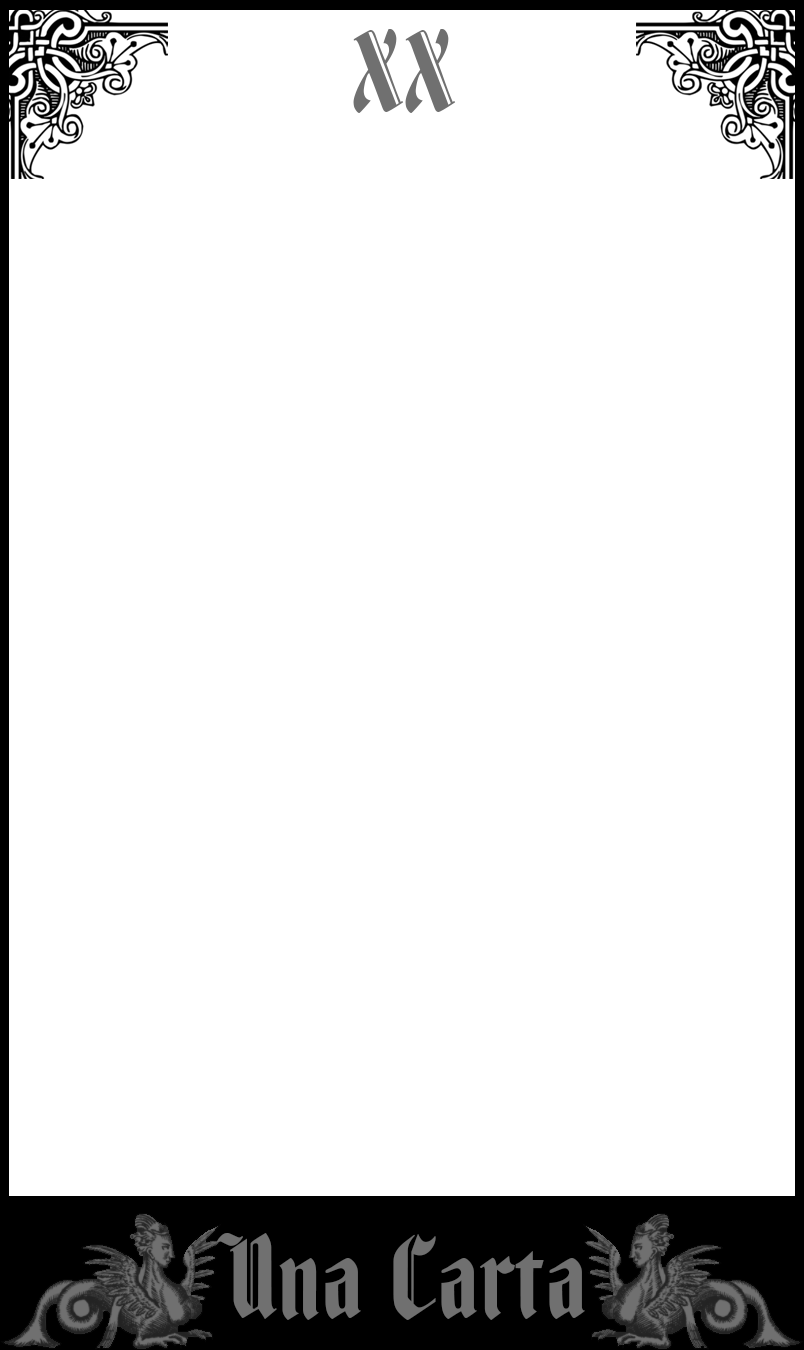
<style>
.page{position:relative;width:804px;height:1350px;background:#ffffff}
.page>*{position:absolute;margin:0}
.t1{font:119.9px "FenwickWoodtype";color:#707070}
.t2{font:124.6px "FenwickWoodtype";color:#707070}
</style>
<div class="page">
<p class="t1" style="left:353px;top:29px;width:103px;height:84px">XX</p>
<p class="t2" style="left:216px;top:1233px;width:369px;height:87px">Una Carta</p>
</div>
